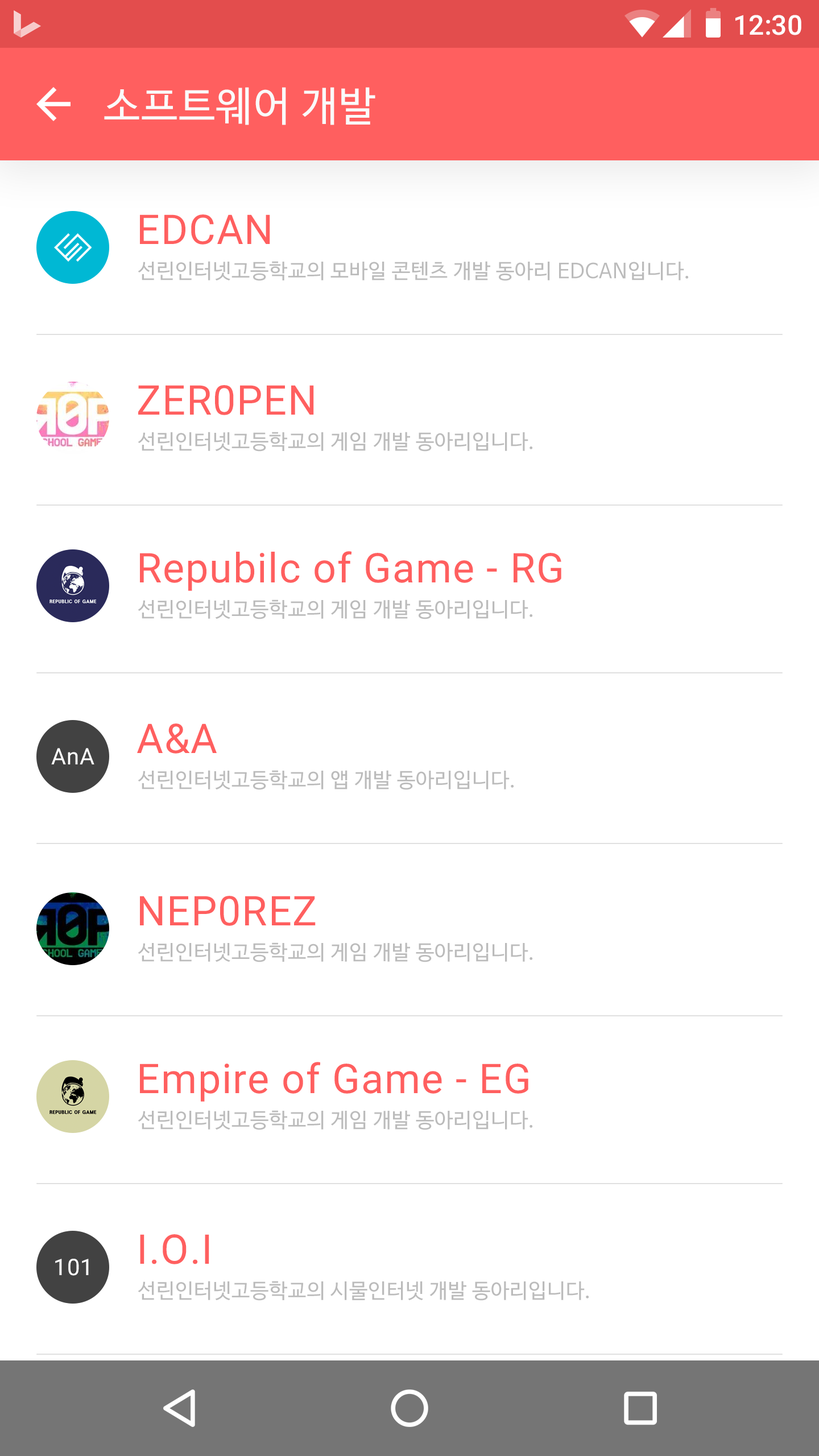
<style>
.page{position:relative;width:819px;height:1456px;background:#ffffff}
.page>*{position:absolute;margin:0}
.t1{font:27.3px "Roboto-Medium";color:#ffffff}
.t2{font:40.9px "NanumBarunGothic";letter-spacing:0.025em;color:#fafafa}
.t3{font:40.9px "Roboto-Regular";letter-spacing:0.025em;color:#ff5f5f}
.t4{font:20.5px "NanumBarunGothic";letter-spacing:0.025em;color:#bbbbbb}
.t5{font:22.7px "Roboto-Regular";letter-spacing:0.025em;color:#ffffff}
</style>
<div class="page">
<p class="t1" style="left:735px;top:15px;width:66px;height:20px">12:30</p>
<p class="t2" style="left:104px;top:87px;width:271px;height:38px">소프트웨어 개발</p>
<p class="t3" style="left:140px;top:214px;width:130px;height:31px">EDCAN</p>
<p class="t4" style="left:138px;top:261px;width:551px;height:20px">선린인터넷고등학교의 모바일 콘텐츠 개발 동아리 EDCAN입니다.</p>
<p class="t3" style="left:138px;top:385px;width:176px;height:30px">ZER0PEN</p>
<p class="t4" style="left:138px;top:432px;width:395px;height:20px">선린인터넷고등학교의 게임 개발 동아리입니다.</p>
<p class="t3" style="left:140px;top:551px;width:421px;height:40px">Repubilc of Game - RG</p>
<p class="t4" style="left:138px;top:599px;width:395px;height:20px">선린인터넷고등학교의 게임 개발 동아리입니다.</p>
<p class="t3" style="left:137px;top:723px;width:80px;height:31px">A&amp;A</p>
<p class="t5" style="left:51px;top:748px;width:43px;height:16px">AnA</p>
<p class="t4" style="left:138px;top:770px;width:376px;height:20px">선린인터넷고등학교의 앱 개발 동아리입니다.</p>
<p class="t3" style="left:140px;top:896px;width:176px;height:30px">NEP0REZ</p>
<p class="t4" style="left:138px;top:942px;width:395px;height:20px">선린인터넷고등학교의 게임 개발 동아리입니다.</p>
<p class="t3" style="left:140px;top:1062px;width:388px;height:40px">Empire of Game - EG</p>
<p class="t4" style="left:138px;top:1110px;width:395px;height:20px">선린인터넷고등학교의 게임 개발 동아리입니다.</p>
<p class="t3" style="left:140px;top:1234px;width:69px;height:30px">I.O.I</p>
<p class="t5" style="left:55px;top:1259px;width:34px;height:17px">101</p>
<p class="t4" style="left:138px;top:1281px;width:451px;height:20px">선린인터넷고등학교의 시물인터넷 개발 동아리입니다.</p>
</div>
